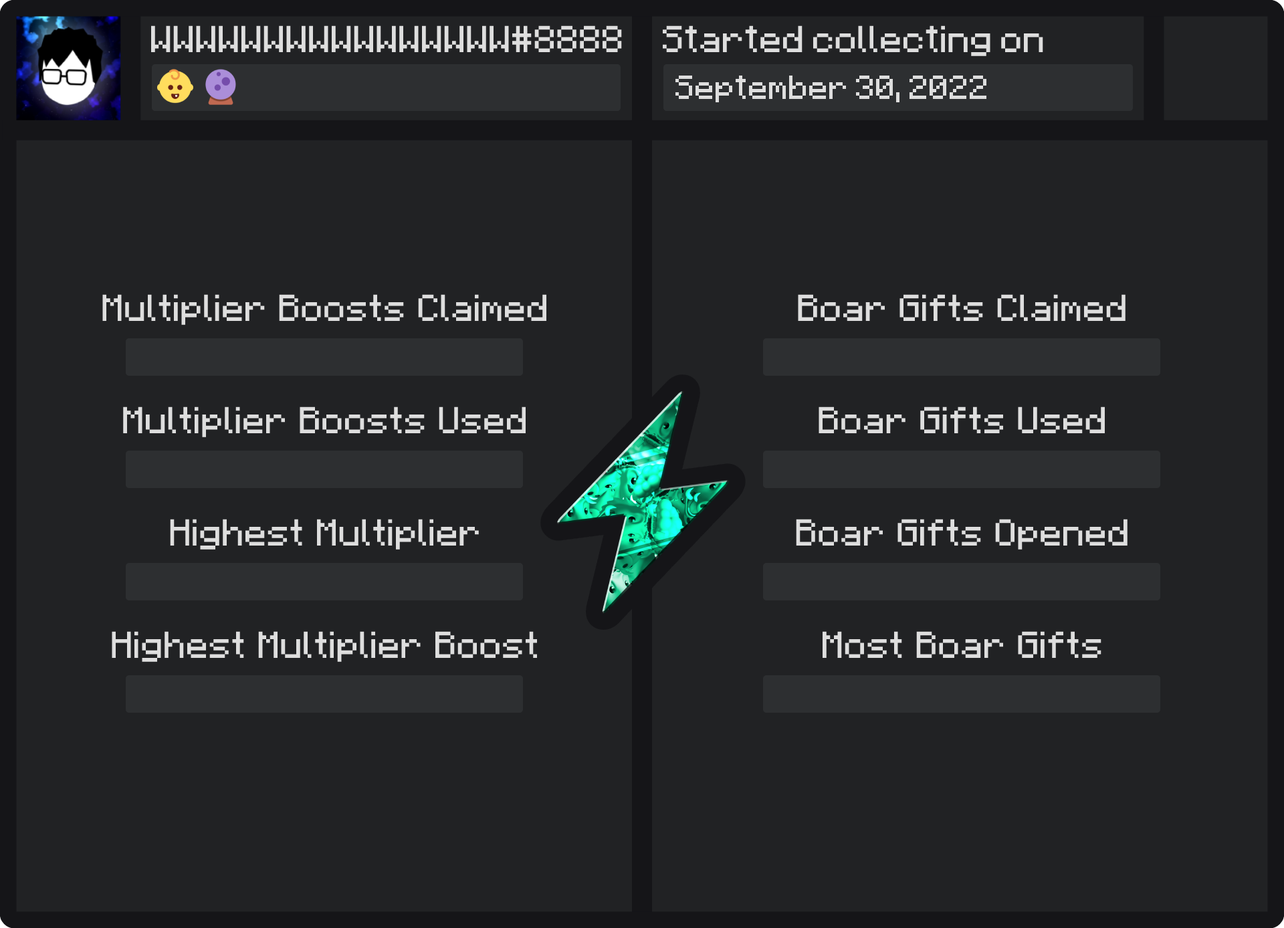
<style>
.page{position:relative;width:1284px;height:928px;background:#212224}
.page>*{position:absolute;margin:0}
.t1{font:30.1px "Minecraft";color:#dedede}
.t2{font:26.8px "Minecraft";color:#dedede}
.t3{font:30.1px "F77-Minecraft";color:#dedede}
</style>
<div class="page">
<p class="t1" style="left:151px;top:25px;width:471px;height:28px">WWWWWWWWWWWWWWWW#8888</p>
<p class="t1" style="left:663px;top:25px;width:381px;height:31px">Started collecting on</p>
<p class="t2" style="left:676px;top:76px;width:311px;height:26px">September 30, 2022</p>
<p class="t3" style="left:102px;top:294px;width:445px;height:31px">Multiplier Boosts Claimed</p>
<p class="t3" style="left:798px;top:294px;width:328px;height:28px">Boar Gifts Claimed</p>
<p class="t3" style="left:123px;top:407px;width:403px;height:30px">Multiplier Boosts Used</p>
<p class="t3" style="left:819px;top:407px;width:286px;height:26px">Boar Gifts Used</p>
<p class="t3" style="left:170px;top:519px;width:309px;height:31px">Highest Multiplier</p>
<p class="t3" style="left:796px;top:519px;width:332px;height:31px">Boar Gifts Opened</p>
<p class="t3" style="left:112px;top:631px;width:425px;height:31px">Highest Multiplier Boost</p>
<p class="t3" style="left:823px;top:631px;width:279px;height:27px">Most Boar Gifts</p>
</div>
